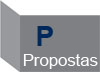
<style>
.page{position:relative;width:100px;height:72px;background:#7f8084}
.page>*{position:absolute;margin:0}
.t1{font:16.7px "ArialMT";color:#fcfcfd}
</style>
<div class="page">
<p class="t1" style="left:23px;top:54px;width:75px;height:15px">Propostas</p>
</div>
